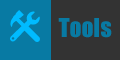
<style>
.page{position:relative;width:120px;height:60px;background:#333333}
.page>*{position:absolute;margin:0}
.t1{font:24px "Impact";color:#087aa3}
</style>
<div class="page">
<p class="t1" style="left:58px;top:18px;width:54px;height:20px">Tools</p>
</div>
